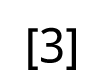
<style>
.page{position:relative;width:105px;height:83px;background:#ffffff}
.page>*{position:absolute;margin:0}
.t1{font:47.9px "DroidSans";color:#000000}
</style>
<div class="page">
<p class="t1" style="left:28px;top:27px;width:48px;height:43px">[3]</p>
</div>
